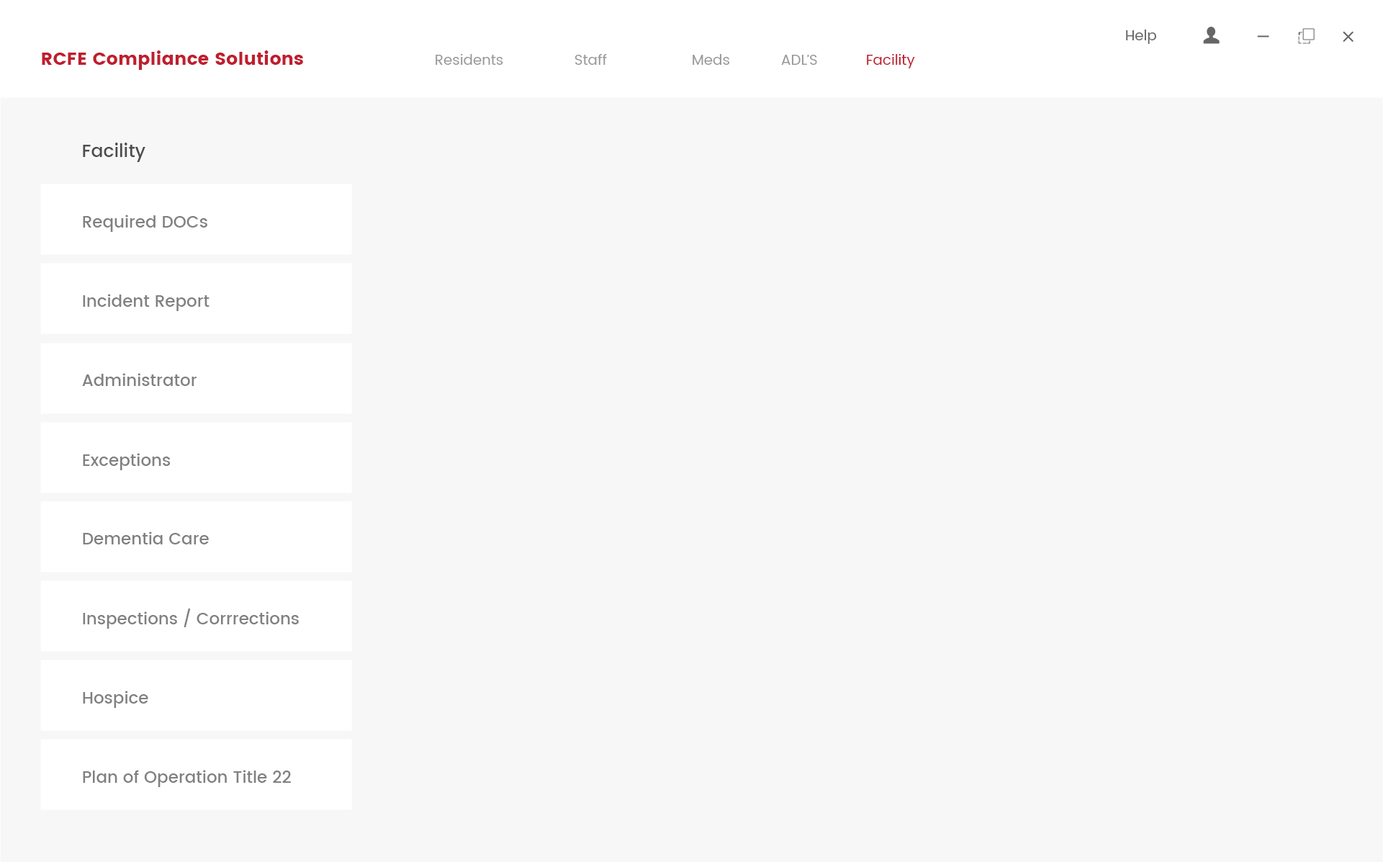
<style>
.page{position:relative;width:1383px;height:862px;background:#f7f7f7}
.page>*{position:absolute;margin:0}
.t1{font:14.4px "Poppins-Regular";color:#666666}
.t2{font:18px "Poppins-Bold";color:#bf1e2e}
.t3{font:14.4px "Poppins-Regular";color:#999999}
.t4{font:14.4px "Poppins-Regular";color:#bf1e2e}
.t5{font:18px "Poppins-Medium";color:#4d4d4d}
.t6{font:16.6px "Poppins-Medium";color:#808080}
</style>
<div class="page">
<p class="t1" style="left:1126px;top:30px;width:31px;height:14px">Help</p>
<p class="t2" style="left:42px;top:50px;width:261px;height:20px">RCFE Compliance Solutions</p>
<p class="t3" style="left:436px;top:54px;width:67px;height:11px">Residents</p>
<p class="t3" style="left:575px;top:54px;width:32px;height:11px">Staff</p>
<p class="t3" style="left:693px;top:54px;width:36px;height:11px">Meds</p>
<p class="t3" style="left:781px;top:55px;width:36px;height:10px">ADL’S</p>
<p class="t4" style="left:867px;top:54px;width:48px;height:14px">Facility</p>
<p class="t5" style="left:83px;top:143px;width:62px;height:19px">Facility</p>
<p class="t6" style="left:83px;top:215px;width:124px;height:17px">Required DOCs</p>
<p class="t6" style="left:83px;top:294px;width:127px;height:17px">Incident Report</p>
<p class="t6" style="left:82px;top:373px;width:115px;height:13px">Administrator</p>
<p class="t6" style="left:83px;top:453px;width:88px;height:17px">Exceptions</p>
<p class="t6" style="left:83px;top:531px;width:126px;height:13px">Dementia Care</p>
<p class="t6" style="left:83px;top:609px;width:216px;height:20px">Inspections / Corrrections</p>
<p class="t6" style="left:83px;top:691px;width:65px;height:17px">Hospice</p>
<p class="t6" style="left:83px;top:770px;width:208px;height:17px">Plan of Operation Title 22</p>
</div>
